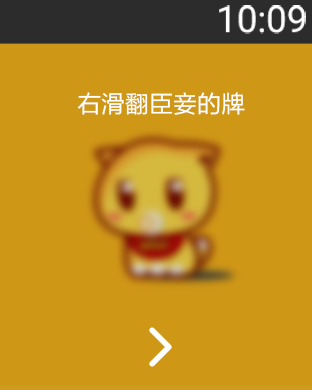
<style>
.page{position:relative;width:312px;height:390px;background:#cf9716}
.page>*{position:absolute;margin:0}
.t1{font:36.7px "Roboto-Regular";color:#ffffff}
.t2{font:24px "FZLTHK--GBK1-0";color:#ffffff}
</style>
<div class="page">
<p class="t1" style="left:219px;top:5px;width:87px;height:29px">10:09</p>
<p class="t2" style="left:77px;top:92px;width:168px;height:23px">右滑翻臣妾的牌</p>
</div>
